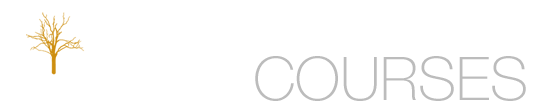
<style>
.page{position:relative;width:550px;height:110px;background:#ffffff}
.page>*{position:absolute;margin:0}
.t1{font:60.2px "HelveticaNeue-Thin";color:#bcbcbc;text-transform:uppercase}
</style>
<div class="page">
<p class="t1" style="left:255px;top:56px;width:271px;height:45px">Courses</p>
</div>
